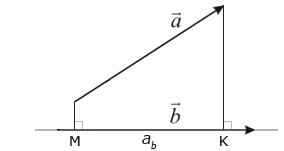
<style>
.page{position:relative;width:284px;height:151px;background:#ffffff}
.page>*{position:absolute;margin:0}
.t1{font:14.4px "Verdana";color:#212121}
.t2{font:16.5px "Verdana";color:#212121;font-style:italic}
</style>
<div class="page">
<p class="t1" style="left:70px;top:136px;width:10px;height:10px">M</p>
<p class="t2" style="left:142px;top:135px;width:15px;height:14px">ab</p>
<p class="t1" style="left:220px;top:136px;width:9px;height:10px">K</p>
</div>
